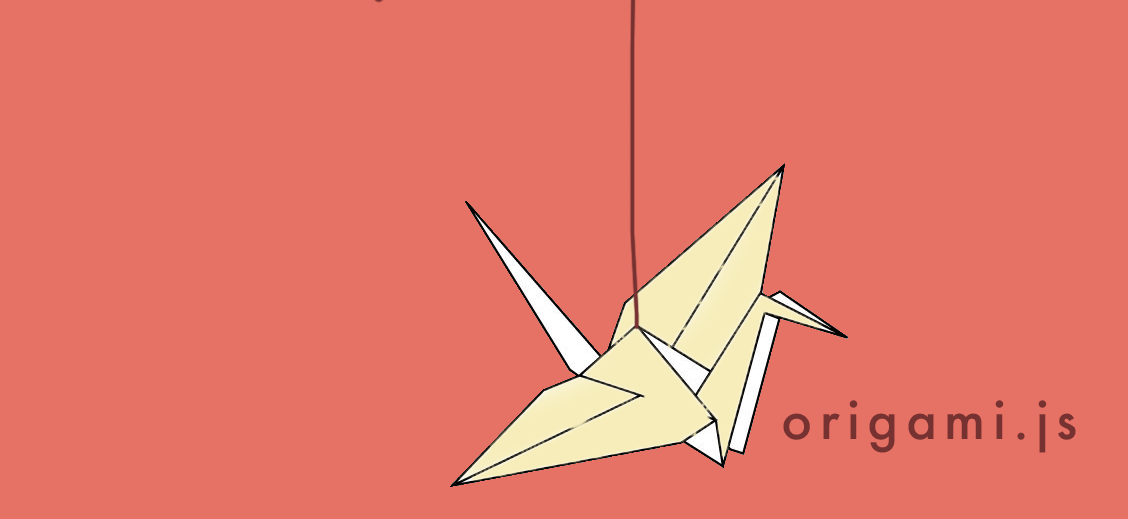
<style>
.page{position:relative;width:1128px;height:519px;background:#e67165}
.page>*{position:absolute;margin:0}
.t1{font:52px "Futura-Medium";letter-spacing:0.14em;color:#763131}
</style>
<div class="page">
<p class="t1" style="left:783px;top:400px;width:293px;height:53px">origami.js</p>
</div>
